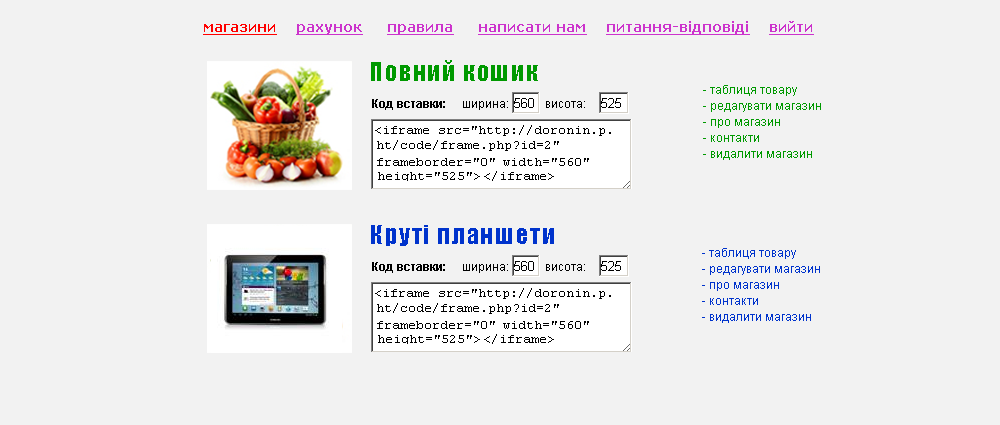
<style>
.page{position:relative;width:1000px;height:425px;background:#f2f2f2}
.page>*{position:absolute;margin:0}
.t1{font:14px "Verdana-Bold";color:#cc33cc;text-decoration:underline}
.t2{font:14px "Verdana-Bold";color:#ff0000;text-decoration:underline}
.t3{font:24px "Impact";letter-spacing:0.075em;color:#009900}
.t4{font:12px/16px "ArialMT";color:#009900}
.t5{font:12px "Arial-BoldMT";color:#000000}
.t6{font:12px "ArialMT";color:#000000}
.t7{font:24px "Impact";letter-spacing:0.075em;color:#0033cc}
.t8{font:12px/16px "ArialMT";color:#0033cc}
</style>
<div class="page">
<p class="t1" style="left:203px;top:21px;width:611px;height:14px"><span class="t2">магазини    </span>рахунок     правила     написати нам    питання-відповіді    вийти</p>
<p class="t3" style="left:371px;top:60px;width:167px;height:21px">Повний кошик</p>
<p class="t4" style="left:703px;top:85px;width:118px;height:75px">- таблиця товару<br>- редагувати магазин<br>- про магазин<br>- контакти<br>- видалити магазин</p>
<p class="t5" style="left:372px;top:99px;width:73px;height:11px">Код вставки:</p>
<p class="t6" style="left:463px;top:101px;width:45px;height:9px">ширина:</p>
<p class="t6" style="left:546px;top:101px;width:39px;height:7px">висота:</p>
<p class="t7" style="left:371px;top:225px;width:183px;height:21px">Круті планшети</p>
<p class="t8" style="left:702px;top:248px;width:118px;height:75px">- таблиця товару<br>- редагувати магазин<br>- про магазин<br>- контакти<br>- видалити магазин</p>
<p class="t5" style="left:372px;top:262px;width:73px;height:11px">Код вставки:</p>
<p class="t6" style="left:463px;top:264px;width:45px;height:9px">ширина:</p>
<p class="t6" style="left:546px;top:264px;width:39px;height:7px">висота:</p>
</div>
